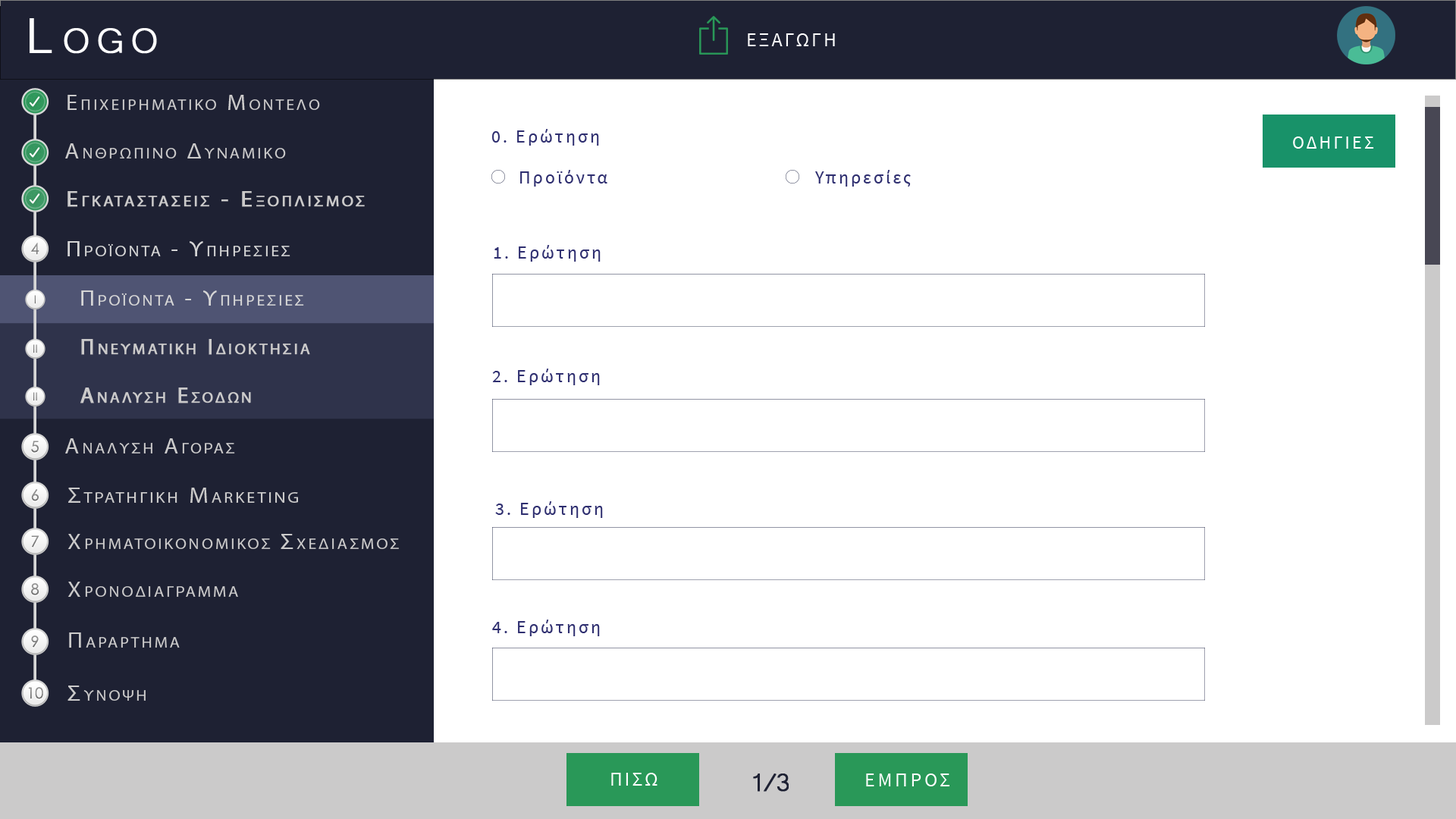
<style>
.page{position:relative;width:1456px;height:819px;background:#ffffff}
.page>*{position:absolute;margin:0}
.t1{font:63.7px "Microsoft-Yi-Baiti";letter-spacing:0.13em;color:#ffffff;font-variant:small-caps;font-weight:bold}
.t2{font:20px "SourceSansPro-Regular";letter-spacing:0.1em;color:#fefefe;text-transform:uppercase}
.t3{font:21.7px "MyriadPro-Regular";letter-spacing:0.13em;color:#cbcaca;font-variant:small-caps;scale:1.09 1}
.t4{font:23.4px "Microsoft-Yi-Baiti";letter-spacing:0.13em;color:#cbcaca;font-variant:small-caps;font-weight:bold}
.t5{font:18.2px "SourceSansPro-Regular";letter-spacing:0.13em;color:#2f2f70}
.t6{font:18.2px "SourceSansPro-Regular";letter-spacing:0.13em;color:#2f2f70;text-transform:uppercase}
.t7{font:18.2px "SourceSansPro-Regular";letter-spacing:0.13em;color:#ffffff;text-transform:uppercase}
.t8{font:21.7px/91px "MyriadPro-Regular";letter-spacing:0.13em;color:#cbcaca;font-variant:small-caps;font-weight:bold;scale:1.09 1}
.t9{font:23.4px/91px "Microsoft-Yi-Baiti";letter-spacing:0.13em;color:#cbcaca;font-variant:small-caps;font-weight:bold}
.t10{font:15.3px "CenturyGothic";color:#878787}
.t11{font:21.7px "MyriadPro-Regular";letter-spacing:0.13em;color:#d6d6d6;font-variant:small-caps;scale:1.09 1}
.t12{font:23.4px "Microsoft-Yi-Baiti";letter-spacing:0.13em;color:#d6d6d6;font-variant:small-caps;font-weight:bold}
.t13{font:11.2px "CenturyGothic";color:#808080}
.t14{font:22.3px "MyriadPro-Regular";letter-spacing:0.13em;color:#cbcaca;font-variant:small-caps;font-weight:bold}
.t15{font:11.2px "CenturyGothic";color:#828282}
.t16{font:15.3px "CenturyGothic";color:#898989}
.t17{font:15.3px "CenturyGothic";color:#838383}
.t18{font:22.2px "MyriadPro-Regular";letter-spacing:0.13em;color:#cbcaca;font-variant:small-caps;scale:1.09 1}
.t19{font:25.5px "Microsoft-Yi-Baiti";letter-spacing:0.13em;color:#cbcaca;font-variant:small-caps;font-weight:bold}
.t20{font:15.3px "CenturyGothic";color:#888888}
.t21{font:15.3px "CenturyGothic";color:#8b8b8b}
.t22{font:23.7px "Microsoft-Yi-Baiti";letter-spacing:0.13em;color:#cbcaca;font-variant:small-caps;scale:1.09 1}
.t23{font:32.8px "Microsoft-Yi-Baiti";letter-spacing:-0.1em;color:#1e2133;font-weight:bold}
.t24{font:20px "SourceSansPro-Regular";letter-spacing:0.13em;color:#fefefe;text-transform:uppercase}
</style>
<div class="page">
<p class="t1" style="left:30px;top:18px;width:127px;height:36px">Logo</p>
<p class="t2" style="left:748px;top:33px;width:87px;height:13px">εξαγωγη</p>
<p class="t3" style="left:67px;top:95px;width:253px;height:15px"><span class="t4">   </span>Επιχειρηματικο Μοντελο</p>
<p class="t5" style="left:492px;top:129px;width:107px;height:17px"><span class="t6">0. </span>Ερώτηση</p>
<p class="t7" style="left:1293px;top:136px;width:81px;height:13px">Οδηγιεσ</p>
<p class="t3" style="left:65px;top:143px;width:221px;height:15px"><span class="t4">   </span>Ανθρωπινο Δυναμικο</p>
<p class="t5" style="left:520px;top:170px;width:87px;height:17px">Προϊόντα</p>
<p class="t5" style="left:815px;top:170px;width:96px;height:17px">Υπηρεσίες</p>
<p class="t8" style="left:67px;top:191px;width:298px;height:16px"><span class="t9">   </span>Εγκαταστασεισ - Εξοπλισμοσ<br><br><span class="t9">Equipment</span></p>
<p class="t10" style="left:31px;top:243px;width:8px;height:12px">4</p>
<p class="t11" style="left:67px;top:241px;width:223px;height:15px"><span class="t12">   </span>Προϊοντα - Υπηρεσιεσ</p>
<p class="t5" style="left:494px;top:245px;width:107px;height:17px"><span class="t6">1. </span>Ερώτηση</p>
<p class="t11" style="left:81px;top:290px;width:223px;height:16px"><span class="t12">   </span>Προϊοντα - Υπηρεσιεσ</p>
<p class="t13" style="left:34px;top:295px;width:2px;height:9px">I</p>
<p class="t14" style="left:81px;top:339px;width:229px;height:16px">Πνευματικη Ιδιοκτησια</p>
<p class="t15" style="left:33px;top:344px;width:4px;height:9px">II</p>
<p class="t5" style="left:492px;top:369px;width:108px;height:16px"><span class="t6">2. </span>Ερώτηση</p>
<p class="t14" style="left:80px;top:388px;width:171px;height:15px">Αναλυση Εσοδων</p>
<p class="t15" style="left:33px;top:392px;width:4px;height:9px">II</p>
<p class="t16" style="left:31px;top:441px;width:8px;height:12px">5</p>
<p class="t3" style="left:65px;top:438px;width:170px;height:15px"><span class="t4">   </span>Αναλυση Αγορασ</p>
<p class="t17" style="left:31px;top:489px;width:8px;height:12px">6</p>
<p class="t18" style="left:68px;top:488px;width:230px;height:15px"><span class="t19">   </span>Στρατηγικη Marketing</p>
<p class="t5" style="left:495px;top:501px;width:108px;height:17px"><span class="t6">3. </span>Ερώτηση</p>
<p class="t3" style="left:67px;top:534px;width:332px;height:15px"><span class="t19">   </span>Χρηματοικονομικοσ Σχεδιασμοσ</p>
<p class="t20" style="left:31px;top:535px;width:8px;height:13px">7</p>
<p class="t3" style="left:67px;top:582px;width:171px;height:15px"><span class="t19">   </span>Χρονοδιαγραμμα</p>
<p class="t21" style="left:31px;top:583px;width:8px;height:12px">8</p>
<p class="t5" style="left:492px;top:620px;width:108px;height:16px"><span class="t6">4. </span>Ερώτηση</p>
<p class="t17" style="left:31px;top:635px;width:8px;height:13px">9</p>
<p class="t3" style="left:69px;top:632px;width:111px;height:16px"><span class="t22">   </span>Παραρτημα</p>
<p class="t10" style="left:28px;top:687px;width:15px;height:12px">10</p>
<p class="t3" style="left:67px;top:686px;width:79px;height:15px"><span class="t22">   </span>Συνοψη</p>
<p class="t2" style="left:611px;top:773px;width:46px;height:13px">Πισω</p>
<p class="t23" style="left:753px;top:773px;width:36px;height:19px">1/3</p>
<p class="t24" style="left:866px;top:773px;width:83px;height:13px">εμπροσ</p>
</div>
